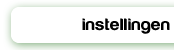
<style>
.page{position:relative;width:174px;height:50px;background:#ffffff}
.page>*{position:absolute;margin:0}
.t1{font:17px "Harabara-Bold";letter-spacing:0.04em;color:#000000;scale:1.1 1}
</style>
<div class="page">
<p class="t1" style="left:82px;top:18px;width:88px;height:16px">instellingen</p>
</div>
